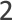
<style>
.page{position:relative;width:12px;height:20px;background:#ffffff}
.page>*{position:absolute;margin:0}
.t1{font:30px "Calibri";color:#3c3c3c}
</style>
<div class="page">
<p class="t1" style="left:0px;top:0px;width:12px;height:20px">2</p>
</div>
